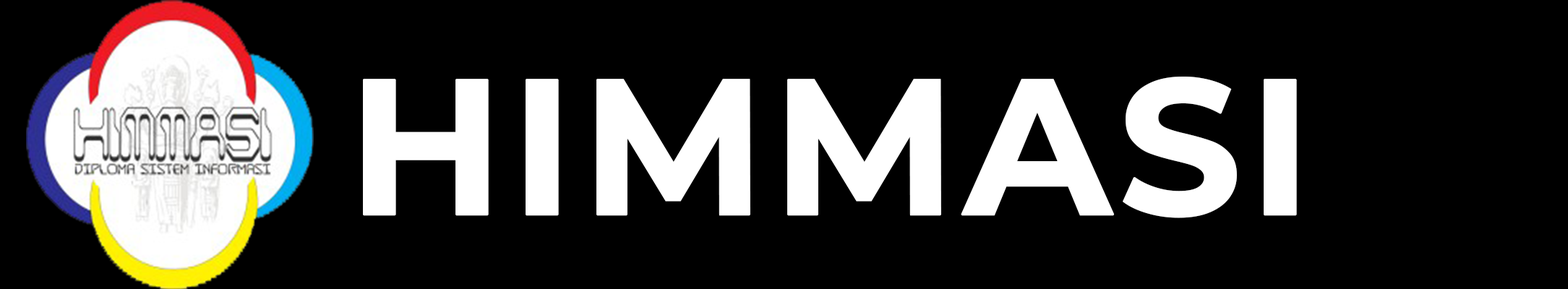
<style>
.page{position:relative;width:1568px;height:289px;background:#000000}
.page>*{position:absolute;margin:0}
.t1{font:192.8px "Montserrat-Bold";letter-spacing:0.01em;color:#ffffff;font-weight:bold}
</style>
<div class="page">
<p class="t1" style="left:363px;top:77px;width:934px;height:141px">HIMMASI</p>
</div>
